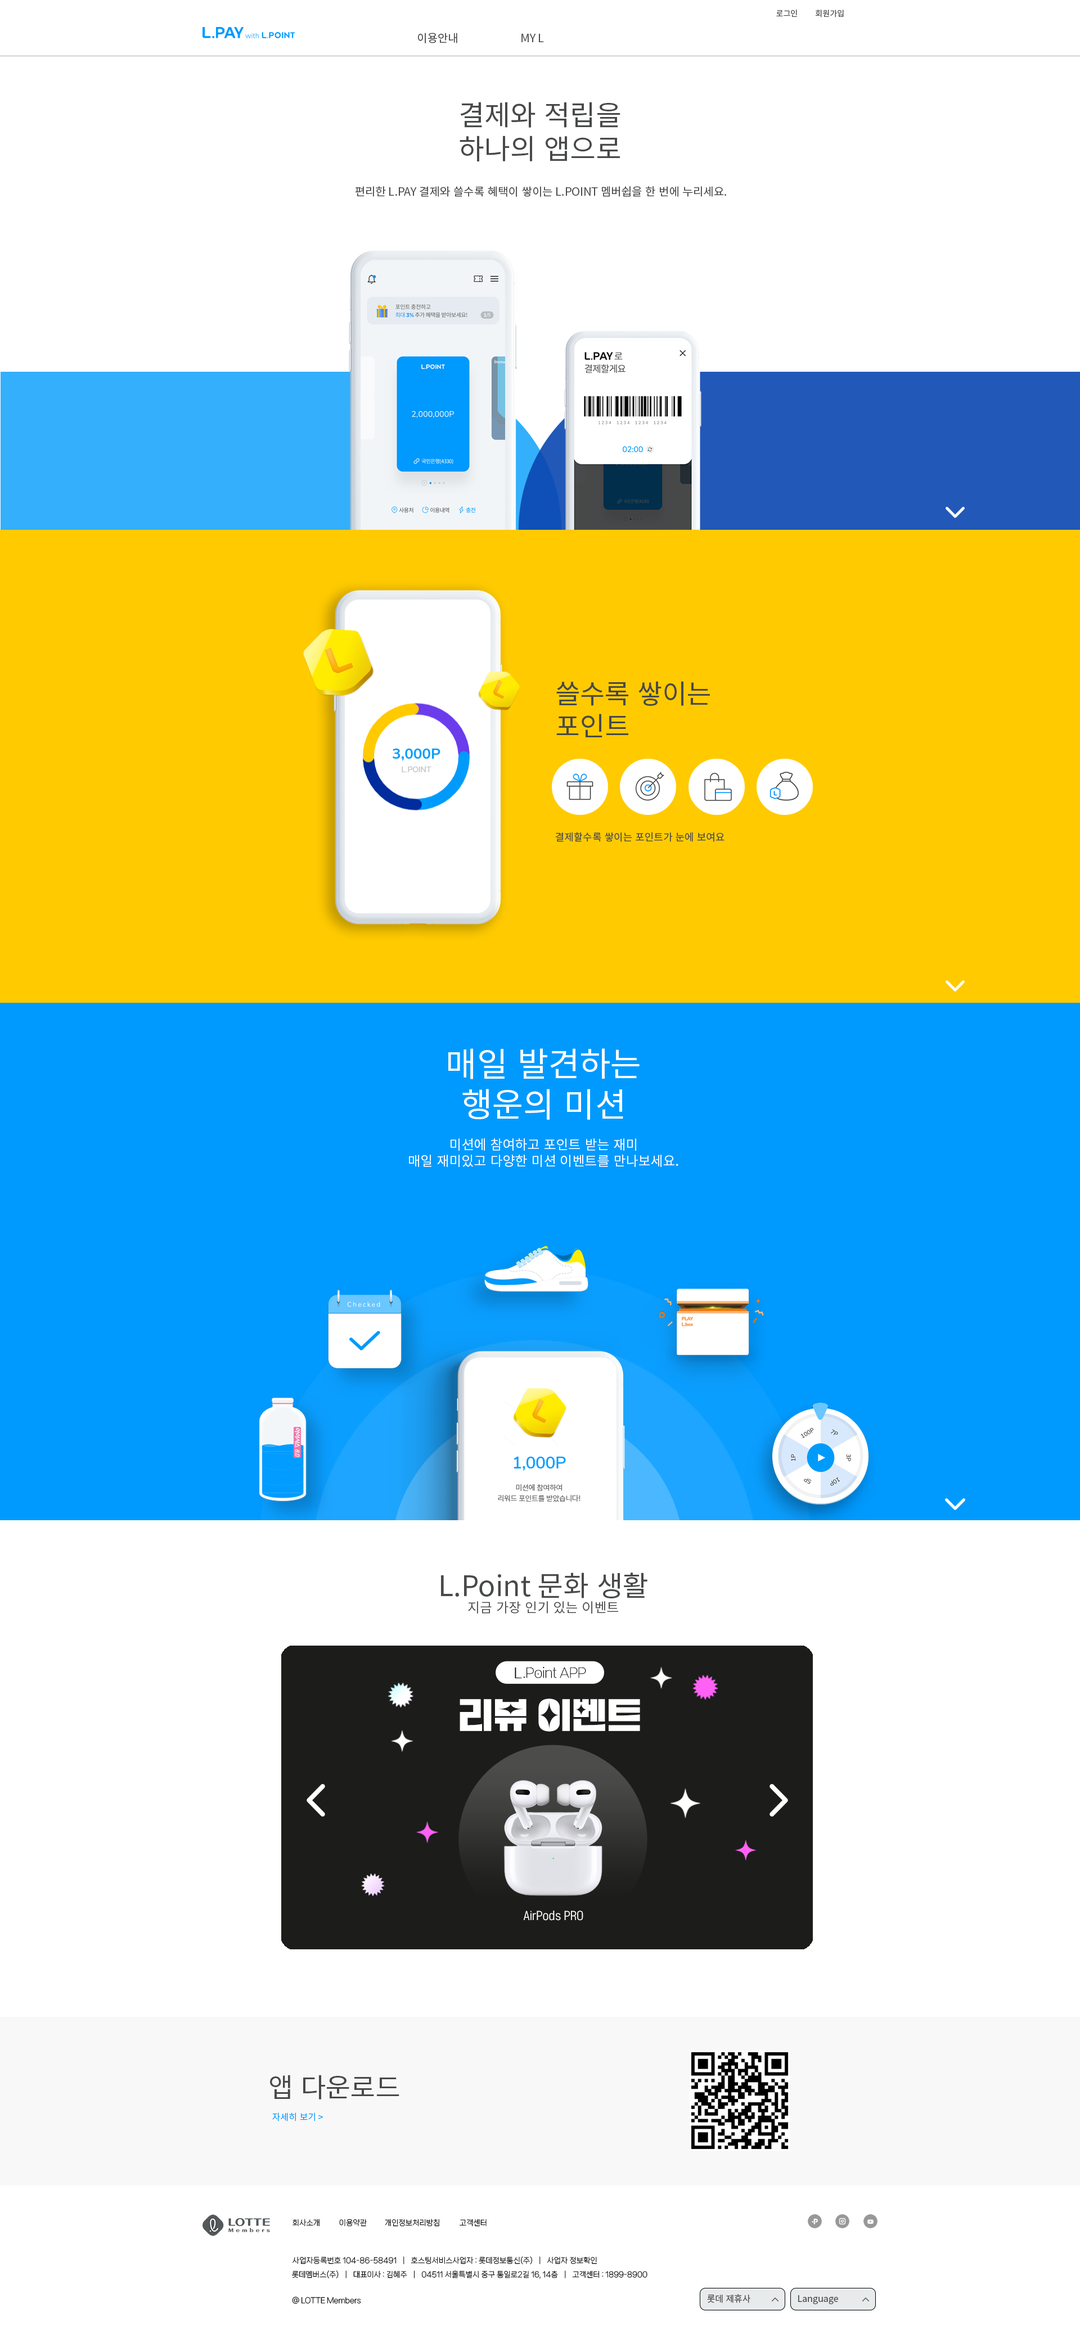
<style>
.page{position:relative;width:1080px;height:2334px;background:#ffffff}
.page>*{position:absolute;margin:0}
.t1{font:7.9px "NotoSansKR-Regular";color:#484949}
.t2{font:11.2px "NotoSansKR-Regular";color:#484949}
.t3{font:28.1px "NotoSansKR-Regular";color:#484949}
.t4{font:27px "NotoSansKR-Regular";color:#484949}
.t5{font:10.1px "NotoSansKR-Regular";color:#484949}
.t6{font:13.5px "NotoSansKR-Regular";color:#ffffff}
.t7{font:33.8px "NotoSansKR-Regular";color:#ffffff}
.t8{font:13.5px "NotoSansKR-Regular";color:#484949}
.t9{font:9px "NotoSansKR-Regular";color:#069dfa}
.t10{font:7.3px "NanumSquareNeoTTF-aLt";color:#000000}
.t11{font:9px "NotoSansKR-Regular";color:#484949}
</style>
<div class="page">
<p class="t1" style="left:776px;top:10px;width:21px;height:7px">로그인</p>
<p class="t1" style="left:816px;top:10px;width:28px;height:7px">회원가입</p>
<p class="t2" style="left:418px;top:33px;width:39px;height:10px">이용안내</p>
<p class="t2" style="left:521px;top:34px;width:23px;height:8px">MY L</p>
<p class="t3" style="left:460px;top:102px;width:160px;height:59px">결제와 적립을<br>하나의 앱으로</p>
<p class="t2" style="left:355px;top:186px;width:371px;height:11px">편리한 L.PAY 결제와 쓸수록 혜택이 쌓이는 L.POINT 멤버쉽을 한 번에 누리세요.</p>
<p class="t4" style="left:556px;top:681px;width:154px;height:56px">쓸수록 쌓이는<br>포인트</p>
<p class="t5" style="left:555px;top:832px;width:169px;height:10px">결제할수록 쌓이는 포인트가 눈에 보여요</p>
<p class="t6" style="left:409px;top:1048px;width:269px;height:119px;text-align:center"><span class="t7">매일 발견하는<br>행운의 미션<br></span><br>미션에 참여하고 포인트 받는 재미<br>매일 재미있고 다양한 미션 이벤트를 만나보세요.</p>
<p class="t8" style="left:441px;top:1573px;width:206px;height:41px;text-align:center"><span class="t3">L.Point 문화 생활<br></span>지금 가장 인기 있는 이벤트</p>
<p class="t4" style="left:270px;top:2075px;width:129px;height:25px">앱 다운로드</p>
<p class="t9" style="left:272px;top:2113px;width:51px;height:9px">자세히 보기 &gt;</p>
<p class="t10" style="left:292px;top:2219px;width:28px;height:8px">회사소개</p>
<p class="t10" style="left:339px;top:2219px;width:28px;height:8px">이용약관</p>
<p class="t10" style="left:385px;top:2219px;width:54px;height:8px">개인정보처리방침</p>
<p class="t10" style="left:460px;top:2219px;width:27px;height:8px">고객센터</p>
<p class="t10" style="left:292px;top:2257px;width:305px;height:8px">사업자등록번호 104-86-58491  │  호스팅서비스사업자 : 롯데정보통신(주)  │  사업자 정보확인</p>
<p class="t10" style="left:292px;top:2271px;width:355px;height:8px">롯데멤버스(주)  │  대표이사 : 김혜주  │  04511 서울특별시 중구 통일로2길 16, 14층  │  고객센터 : 1899-8900</p>
<p class="t10" style="left:292px;top:2297px;width:69px;height:8px">@ LOTTE Members</p>
<p class="t11" style="left:707px;top:2294px;width:43px;height:9px">롯데 제휴사</p>
<p class="t11" style="left:798px;top:2296px;width:40px;height:9px">Language</p>
</div>
